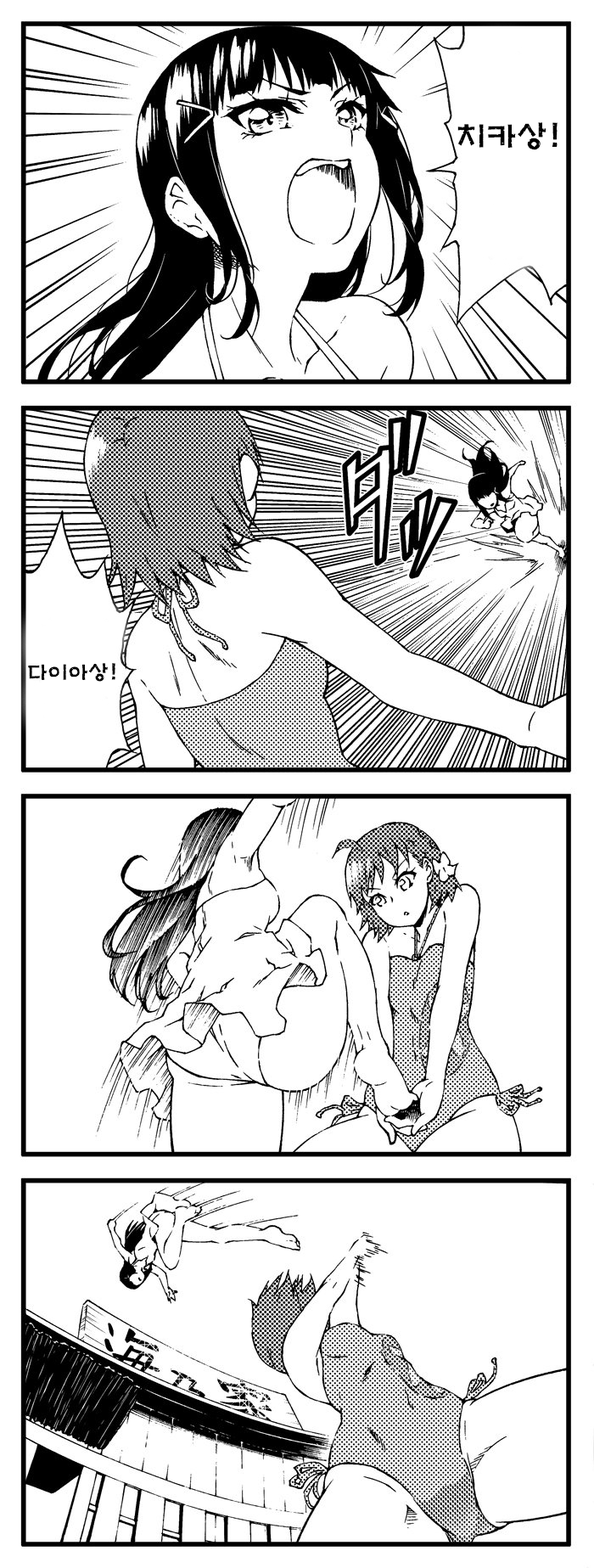
<style>
.page{position:relative;width:594px;height:1568px;background:#ffffff}
.page>*{position:absolute;margin:0}
.t1{font:30.6px "H2mkpB";color:#000000}
.t2{font:20.4px "H2mkpB";color:#000000}
</style>
<div class="page">
<p class="t1" style="left:458px;top:122px;width:100px;height:28px">치카상!</p>
<p class="t2" style="left:28px;top:663px;width:87px;height:19px">다이아상!</p>
</div>
